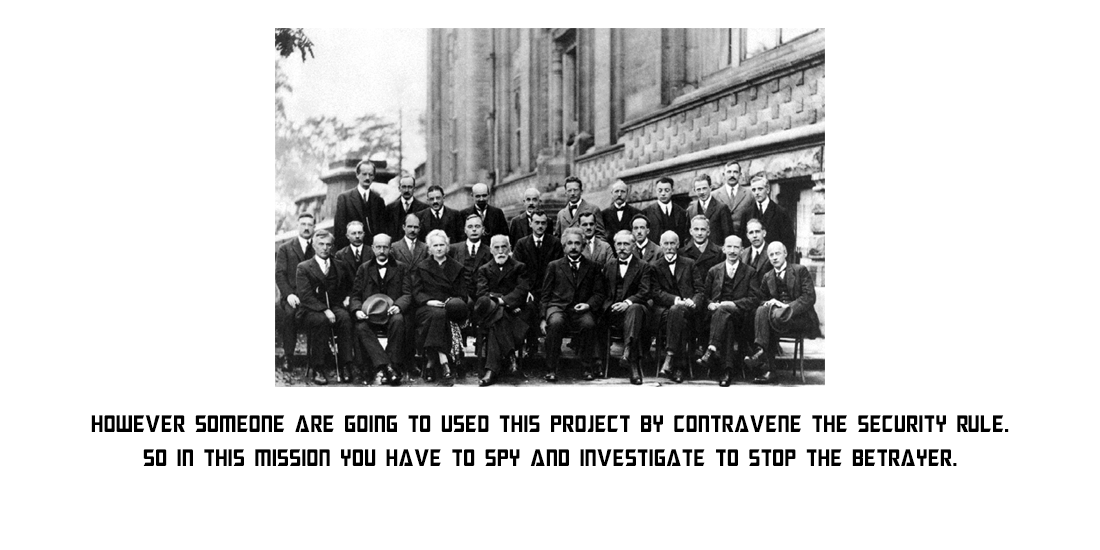
<style>
.page{position:relative;width:1100px;height:550px;background:#ffffff}
.page>*{position:absolute;margin:0}
.t1{font:24px "MegatronCondensed";color:#000000}
</style>
<div class="page">
<p class="t1" style="left:91px;top:415px;width:918px;height:17px">however someone are going to used this project By contravene the security rule.</p>
<p class="t1" style="left:143px;top:449px;width:814px;height:17px">SO in this mission you have to Spy and investigate to Stop the betrayer.</p>
</div>
